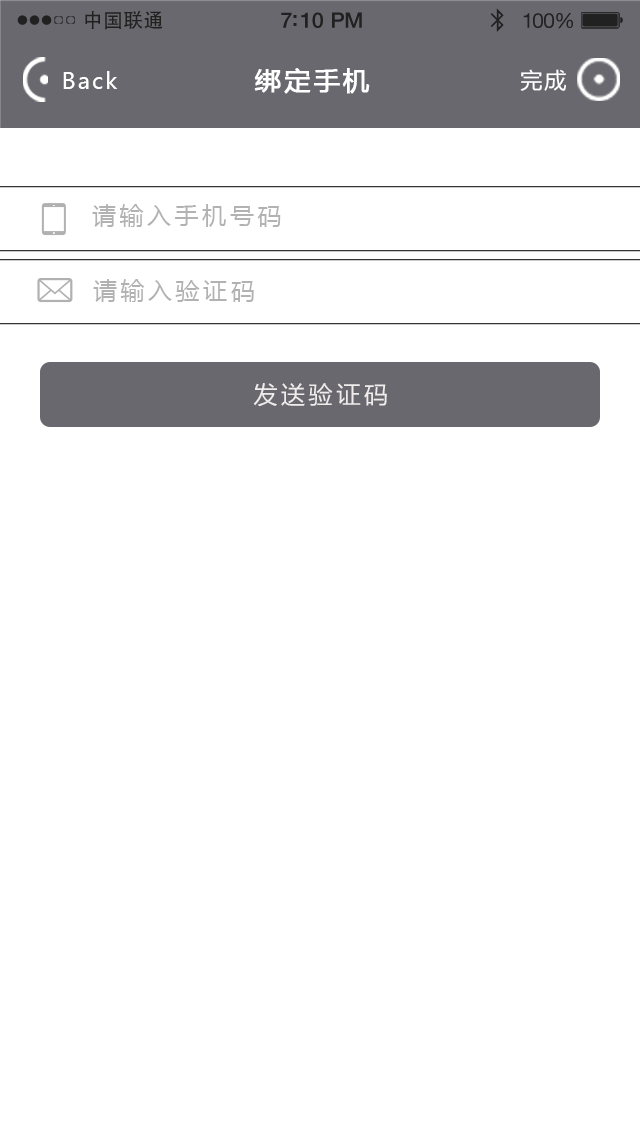
<style>
.page{position:relative;width:640px;height:1136px;background:#ffffff}
.page>*{position:absolute;margin:0}
.t1{font:19.7px "AdobeHeitiStd-Regular";letter-spacing:0.02em;color:#212121}
.t2{font:21.4px "HelveticaNeue-Medium";letter-spacing:-0.02em;color:#212121}
.t3{font:20.6px "HelveticaNeue";letter-spacing:-0.02em;color:#212121}
.t4{font:22px "MicrosoftYaHei";letter-spacing:0.1em;color:#ffffff}
.t5{font:26px "MicrosoftYaHei";letter-spacing:0.1em;color:#ffffff;font-weight:bold}
.t6{font:24px "MicrosoftYaHei";letter-spacing:0.15em;color:#b2b2b2}
.t7{font:24px "MicrosoftYaHei";letter-spacing:0.15em;color:#f0ecec}
</style>
<div class="page">
<p class="t1" style="left:85px;top:10px;width:78px;height:20px">中国联通</p>
<p class="t2" style="left:281px;top:12px;width:81px;height:16px">7:10 PM</p>
<p class="t3" style="left:523px;top:13px;width:50px;height:16px">100%</p>
<p class="t4" style="left:63px;top:71px;width:55px;height:18px">Back</p>
<p class="t5" style="left:254px;top:68px;width:116px;height:26px">绑定手机</p>
<p class="t4" style="left:520px;top:69px;width:46px;height:22px">完成</p>
<p class="t6" style="left:92px;top:204px;width:189px;height:23px">请输入手机号码</p>
<p class="t6" style="left:93px;top:279px;width:161px;height:23px">请输入验证码</p>
<p class="t7" style="left:253px;top:383px;width:134px;height:24px">发送验证码</p>
</div>
